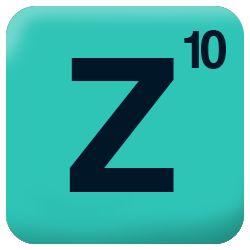
<style>
.page{position:relative;width:250px;height:250px;background:#2ec4b6}
.page>*{position:absolute;margin:0}
.t1{font:55px "CoolveticaRg-Regular";color:#011627}
.t2{font:200px "CoolveticaRg-Regular";color:#011627}
</style>
<div class="page">
<p class="t1" style="left:184px;top:30px;width:42px;height:39px">10</p>
<p class="t2" style="left:69px;top:58px;width:105px;height:134px">Z</p>
</div>
